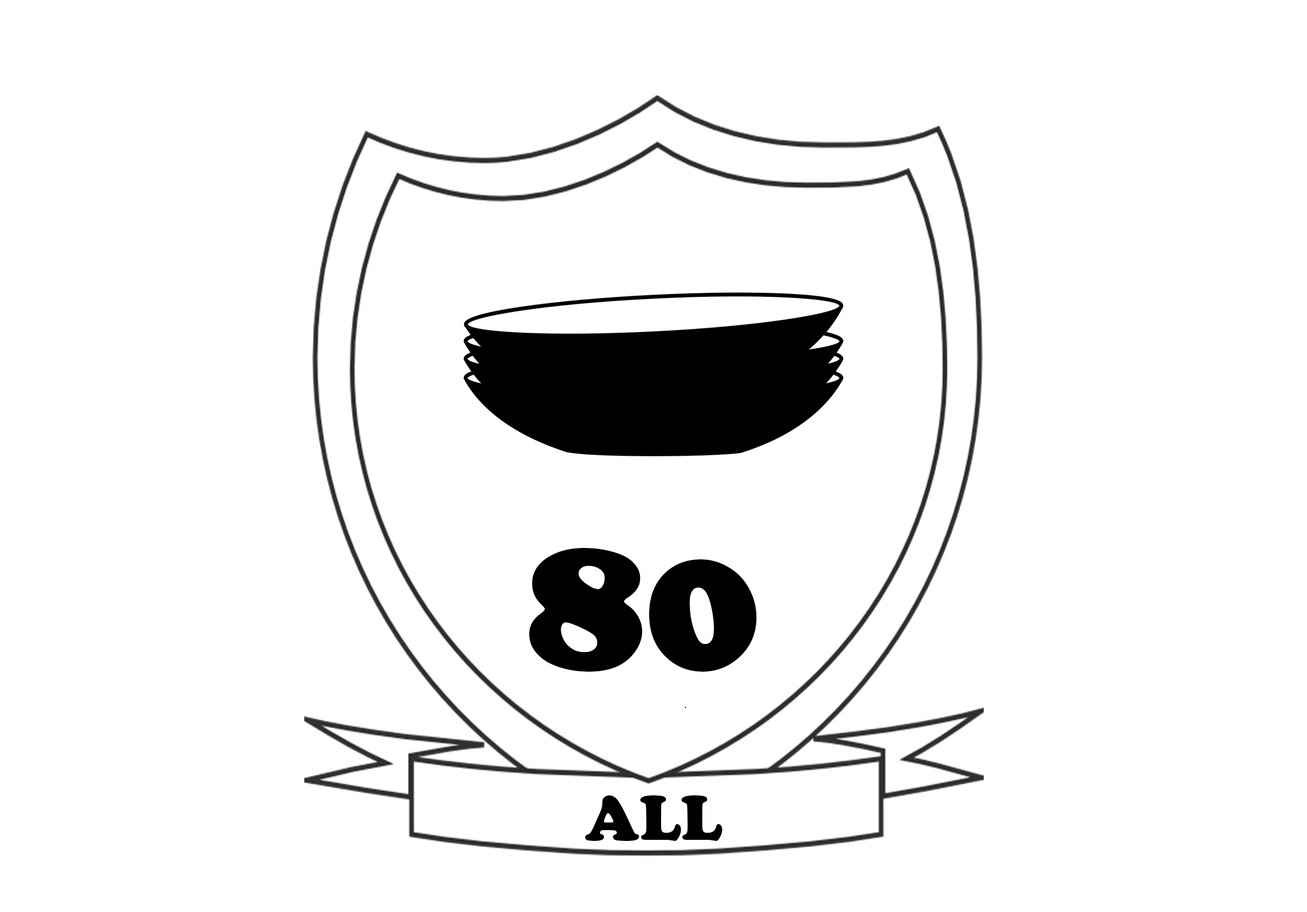
<style>
.page{position:relative;width:1307px;height:912px;background:#ffffff}
.page>*{position:absolute;margin:0}
.t1{font:195.3px "CooperBlack";color:#000000}
.t2{font:65.1px "CooperBlack";color:#000000}
</style>
<div class="page">
<p class="t1" style="left:529px;top:548px;width:228px;height:124px">80</p>
<p class="t2" style="left:585px;top:795px;width:138px;height:46px">ALL</p>
</div>
